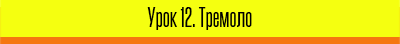
<style>
.page{position:relative;width:400px;height:44px;background:#f5ff10}
.page>*{position:absolute;margin:0}
.t1{font:24px "Steelfish-Regular";color:#000000}
</style>
<div class="page">
<p class="t1" style="left:147px;top:7px;width:105px;height:23px">Урок 12. Тремоло</p>
</div>
